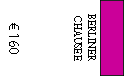
<style>
.page{position:relative;width:124px;height:76px;background:#ffffff}
.page>*{position:absolute;margin:0}
.t1{font:12px "AdobeDevanagari-Regular";color:#000000;scale:0.9 1}
.t2{font:14px "MyriadPro-Regular";color:#000000}
</style>
<div class="page">
<p class="t1" style="left:74px;top:14px;width:22px;height:47px;text-align:center;rotate:90deg">BERLINER <br>CHAUSEE</p>
<p class="t2" style="left:9px;top:23px;width:10px;height:31px;rotate:90deg">€ 160</p>
</div>
